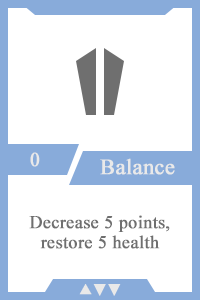
<style>
.page{position:relative;width:200px;height:300px;background:#ffffff}
.page>*{position:absolute;margin:0}
.t1{font:20px "TimesNewRomanPSMT";color:#e9e9e9;font-weight:bold}
.t2{font:22px "TimesNewRomanPSMT";color:#e9e9e9;font-weight:bold}
.t3{font:18px/20px "TimesNewRomanPSMT";color:#6f6f6f;font-weight:bold}
.t4{font:14px "AdobeHeitiStd-Regular";color:#e9e9e9;font-weight:bold}
</style>
<div class="page">
<p class="t1" style="left:30px;top:152px;width:10px;height:15px">0</p>
<p class="t2" style="left:100px;top:158px;width:75px;height:17px">Balance</p>
<p class="t3" style="left:29px;top:215px;width:141px;height:34px;text-align:center">Decrease 5 points, restore 5 health</p>
<p class="t4" style="left:79px;top:284px;width:42px;height:12px">▲▼▼</p>
</div>
